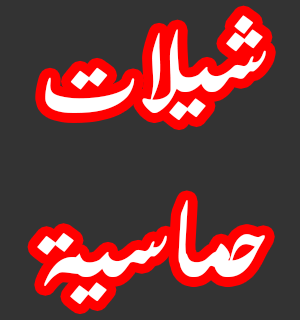
<style>
.page{position:relative;width:300px;height:320px;background:#333333}
.page>*{position:absolute;margin:0}
.t1{font:136px "UrduTypesetting";color:#ffffff}
</style>
<div class="page">
<p class="t1" style="left:37px;top:15px;width:229px;height:290px;text-align:center">شيلات <br>حماسية</p>
</div>
